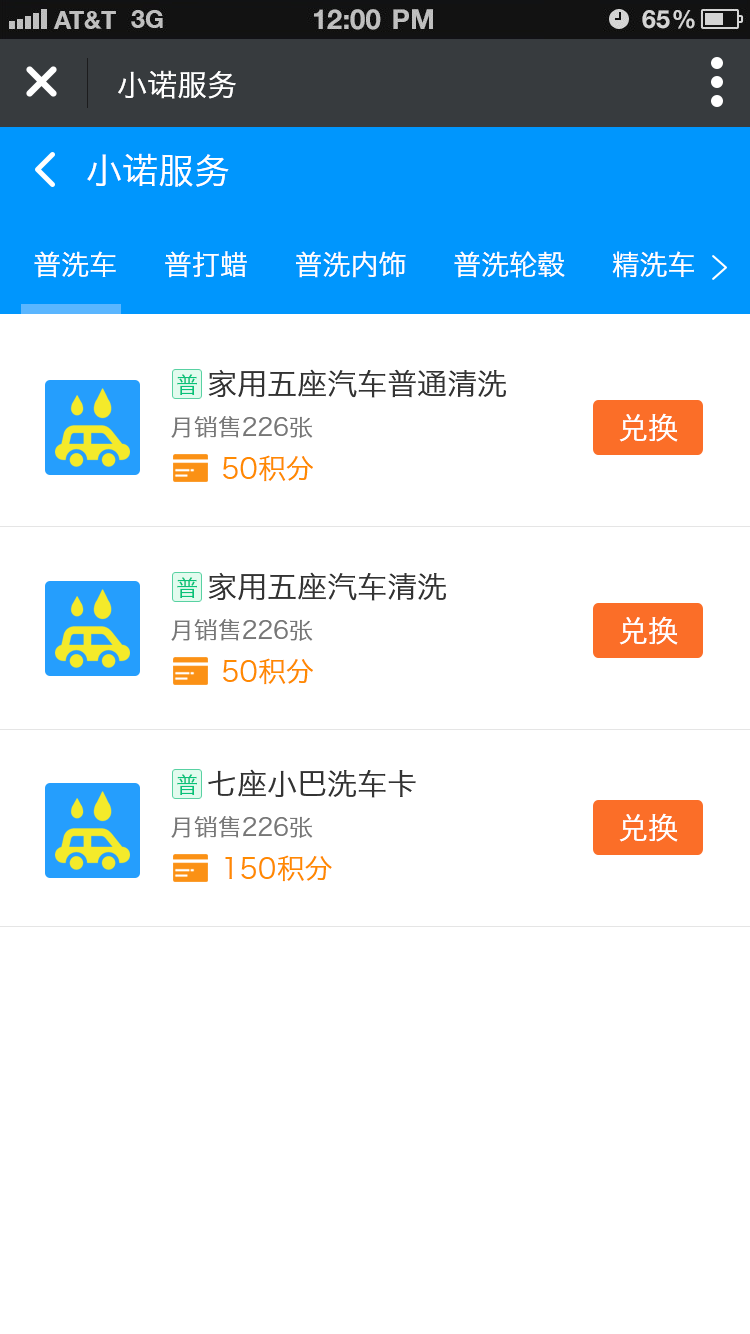
<style>
.page{position:relative;width:750px;height:1334px;background:#ffffff}
.page>*{position:absolute;margin:0}
.t1{font:30px "HiraginoSansGB-W3";color:#ffffff}
.t2{font:36px "HiraginoSansGB-W3";color:#ffffff}
.t3{font:28px "HiraginoSansGB-W3";color:#ffffff}
.t4{font:22px "HiraginoSansGB-W3";color:#07c279}
.t5{font:30px "HiraginoSansGB-W3";color:#333333}
.t6{font:24px "HiraginoSansGB-W3";color:#777777}
.t7{font:28px "HiraginoSansGB-W3";color:#ff8a00}
</style>
<div class="page">
<p class="t1" style="left:118px;top:70px;width:118px;height:29px">小诺服务</p>
<p class="t2" style="left:87px;top:153px;width:142px;height:34px">小诺服务</p>
<p class="t3" style="left:34px;top:251px;width:660px;height:27px">普洗车     普打蜡     普洗内饰     普洗轮毂     精洗车</p>
<p class="t4" style="left:177px;top:374px;width:20px;height:21px">普</p>
<p class="t5" style="left:208px;top:369px;width:298px;height:29px">家用五座汽车普通清洗</p>
<p class="t1" style="left:619px;top:413px;width:59px;height:29px">兑换</p>
<p class="t6" style="left:171px;top:416px;width:142px;height:22px">月销售226张</p>
<p class="t7" style="left:223px;top:455px;width:90px;height:27px">50积分</p>
<p class="t4" style="left:177px;top:577px;width:20px;height:21px">普</p>
<p class="t5" style="left:208px;top:572px;width:238px;height:29px">家用五座汽车清洗</p>
<p class="t1" style="left:619px;top:616px;width:59px;height:29px">兑换</p>
<p class="t6" style="left:171px;top:619px;width:142px;height:22px">月销售226张</p>
<p class="t7" style="left:223px;top:658px;width:90px;height:27px">50积分</p>
<p class="t4" style="left:177px;top:774px;width:20px;height:21px">普</p>
<p class="t5" style="left:208px;top:769px;width:208px;height:29px">七座小巴洗车卡</p>
<p class="t6" style="left:171px;top:816px;width:142px;height:22px">月销售226张</p>
<p class="t1" style="left:619px;top:813px;width:59px;height:29px">兑换</p>
<p class="t7" style="left:225px;top:855px;width:107px;height:27px">150积分</p>
</div>
